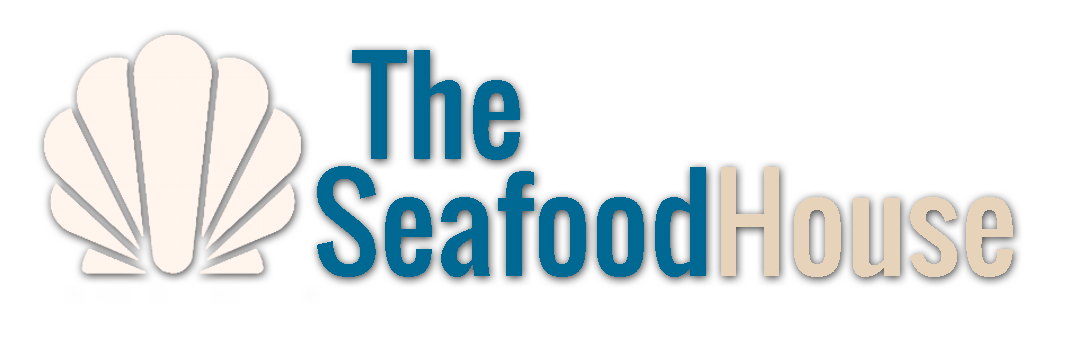
<style>
.page{position:relative;width:1080px;height:356px;background:#ffffff}
.page>*{position:absolute;margin:0}
.t1{font:125px "Oswald-Regular";color:#006994}
.t2{font:125px "Oswald-Regular";color:#e8d3b9}
</style>
<div class="page">
<p class="t1" style="left:352px;top:50px;width:168px;height:110px">The</p>
<p class="t1" style="left:317px;top:166px;width:389px;height:111px">Seafood</p>
<p class="t2" style="left:721px;top:167px;width:292px;height:110px">House</p>
</div>
